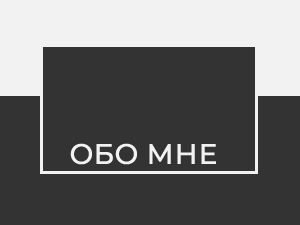
<style>
.page{position:relative;width:300px;height:225px;background:#333333}
.page>*{position:absolute;margin:0}
.t1{font:28px "Montserrat-Medium";color:#f2f2f2;font-weight:bold}
</style>
<div class="page">
<p class="t1" style="left:70px;top:143px;width:146px;height:22px">ОБО МНЕ</p>
</div>
